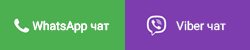
<style>
.page{position:relative;width:250px;height:50px;background:#4caf50}
.page>*{position:absolute;margin:0}
.t1{font:12px "Roboto-Regular";color:#ffffff}
</style>
<div class="page">
<p class="t1" style="left:32px;top:20px;width:78px;height:13px">WhatsApp чат</p>
<p class="t1" style="left:176px;top:20px;width:50px;height:11px">Viber чат</p>
</div>
